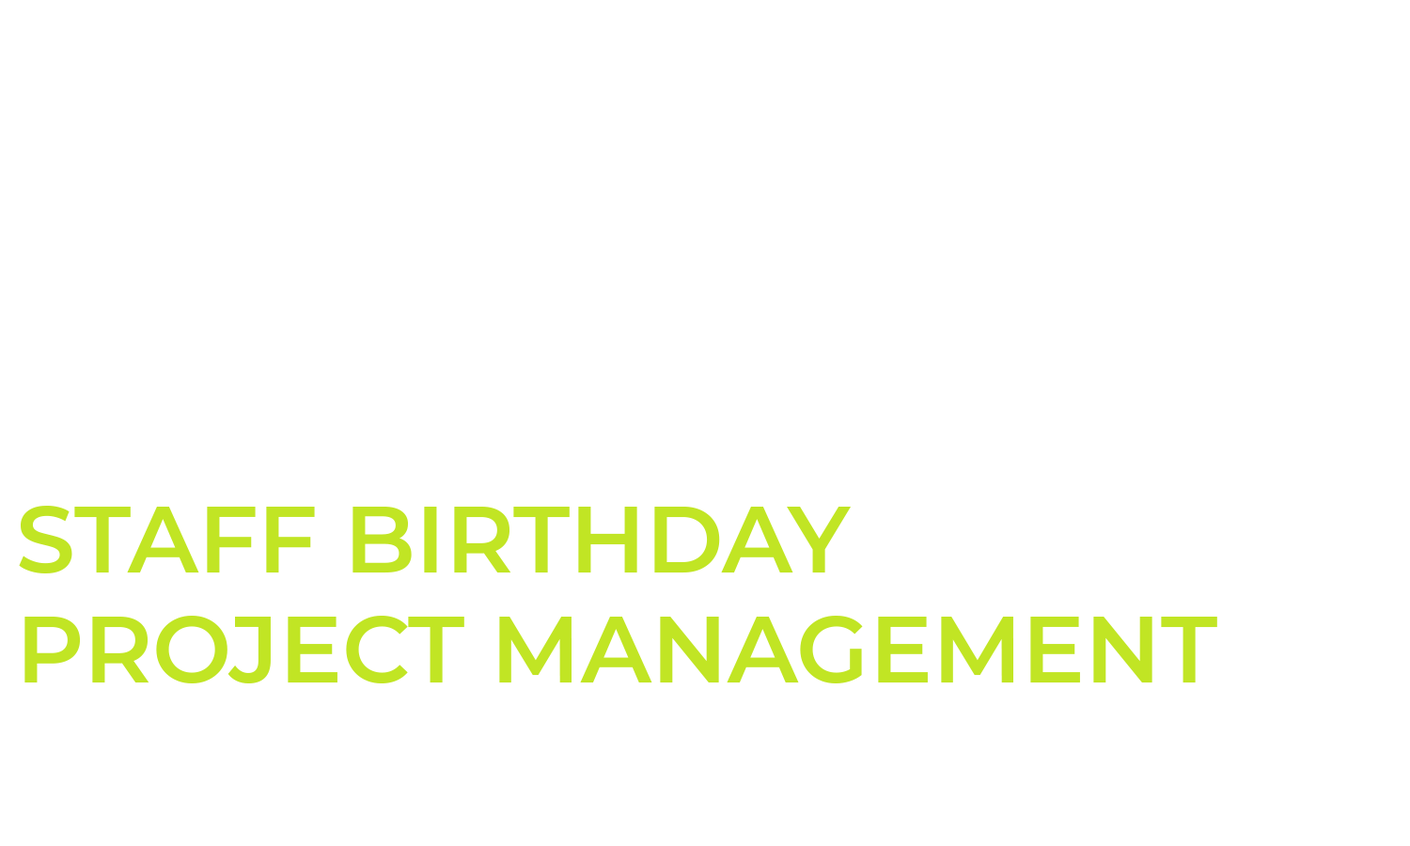
<style>
.page{position:relative;width:1410px;height:846px;background:#ffffff}
.page>*{position:absolute;margin:0}
.t1{font:94px/0.2px "Montserrat-SemiBold";color:#c1e524;text-transform:uppercase}
</style>
<div class="page">
<p class="t1" style="left:19px;top:506px;width:1198px;height:177px">staff birthday<br>project management</p>
</div>
